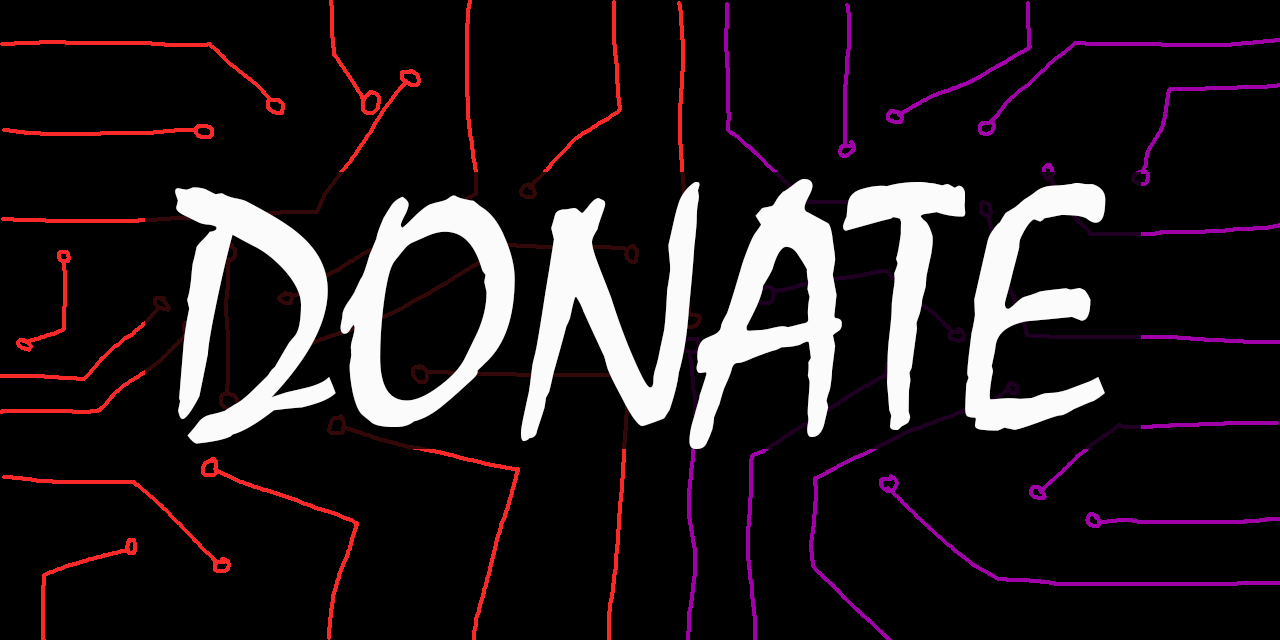
<style>
.page{position:relative;width:1280px;height:640px;background:#000000}
.page>*{position:absolute;margin:0}
.t1{font:350px "Mistral";color:#fbfbfb}
</style>
<div class="page">
<p class="t1" style="left:175px;top:179px;width:931px;height:270px">DONATE</p>
</div>
